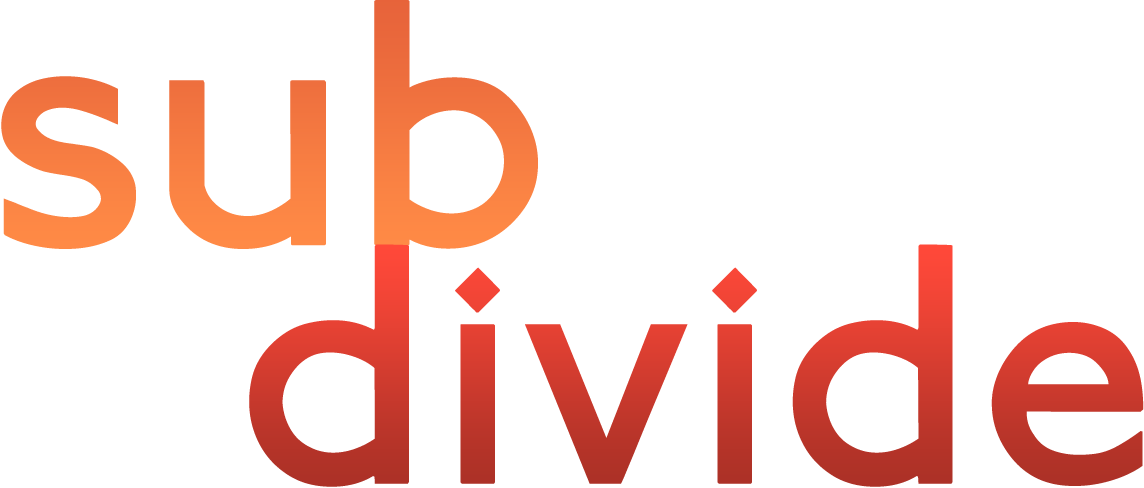
<style>
.page{position:relative;width:1144px;height:488px;background:#ffffff}
.page>*{position:absolute;margin:0}
.t1{font:371.8px "P22JohnstonUnderground";color:#f77e42}
.t2{font:360px "P22JohnstonUnderground"}
</style>
<div class="page">
<p class="t1" style="left:1px;top:0px;width:537px;height:249px">sub</p>
<p class="t2" style="left:249px;top:244px;width:895px;height:243px">divide</p>
</div>
